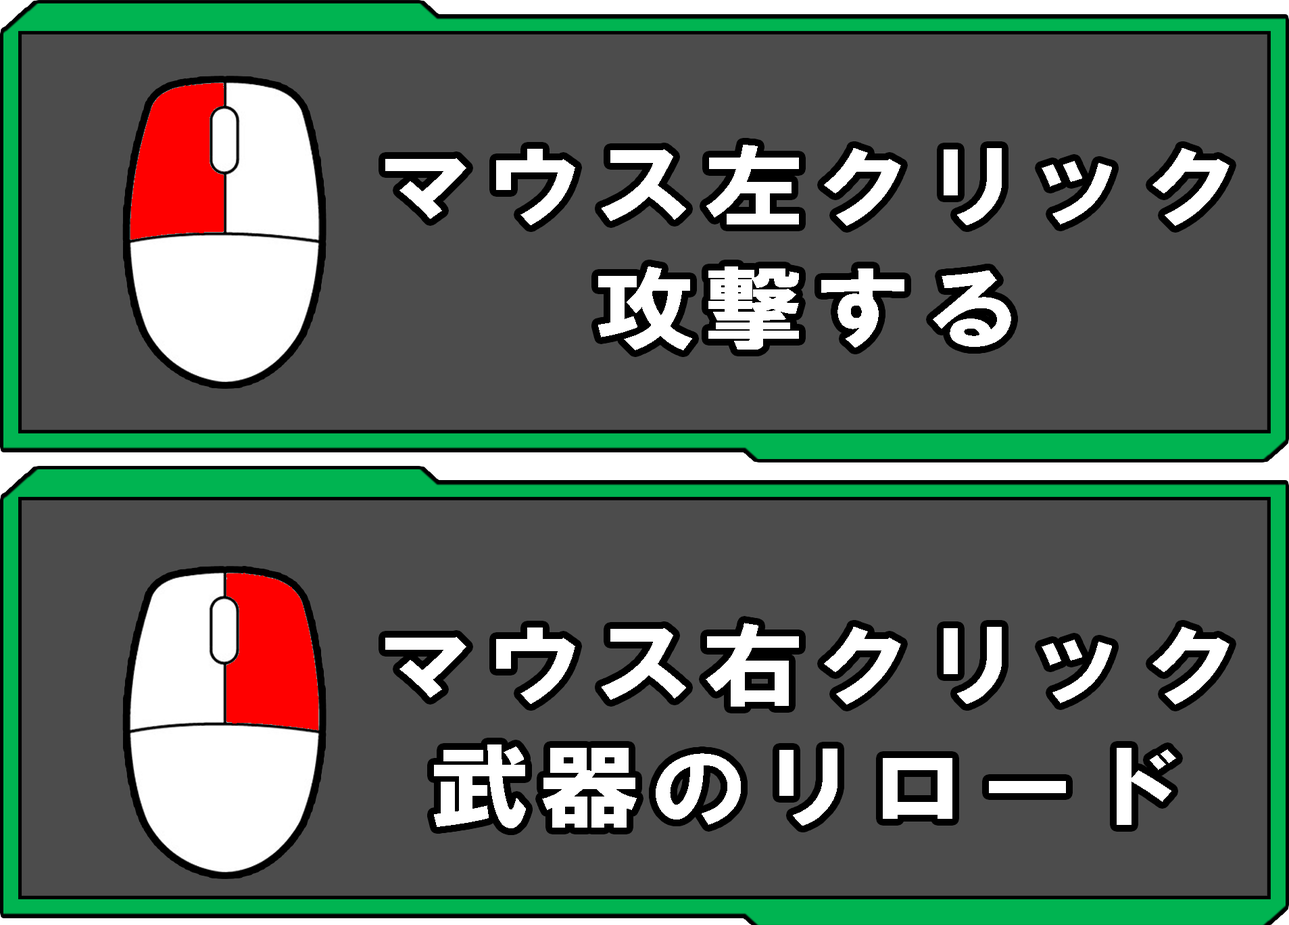
<style>
.page{position:relative;width:1289px;height:925px;background:#4c4c4c}
.page>*{position:absolute;margin:0}
.t1{font:91.3px "HGSSoeiKakugothicUB";letter-spacing:0.08em;color:#ffffff;scale:1.11 1}
</style>
<div class="page">
<p class="t1" style="left:385px;top:145px;width:845px;height:205px;text-align:center">マウス左クリック<br>攻撃する</p>
<p class="t1" style="left:385px;top:623px;width:845px;height:205px;text-align:center">マウス右クリック<br>武器のリロード</p>
</div>
